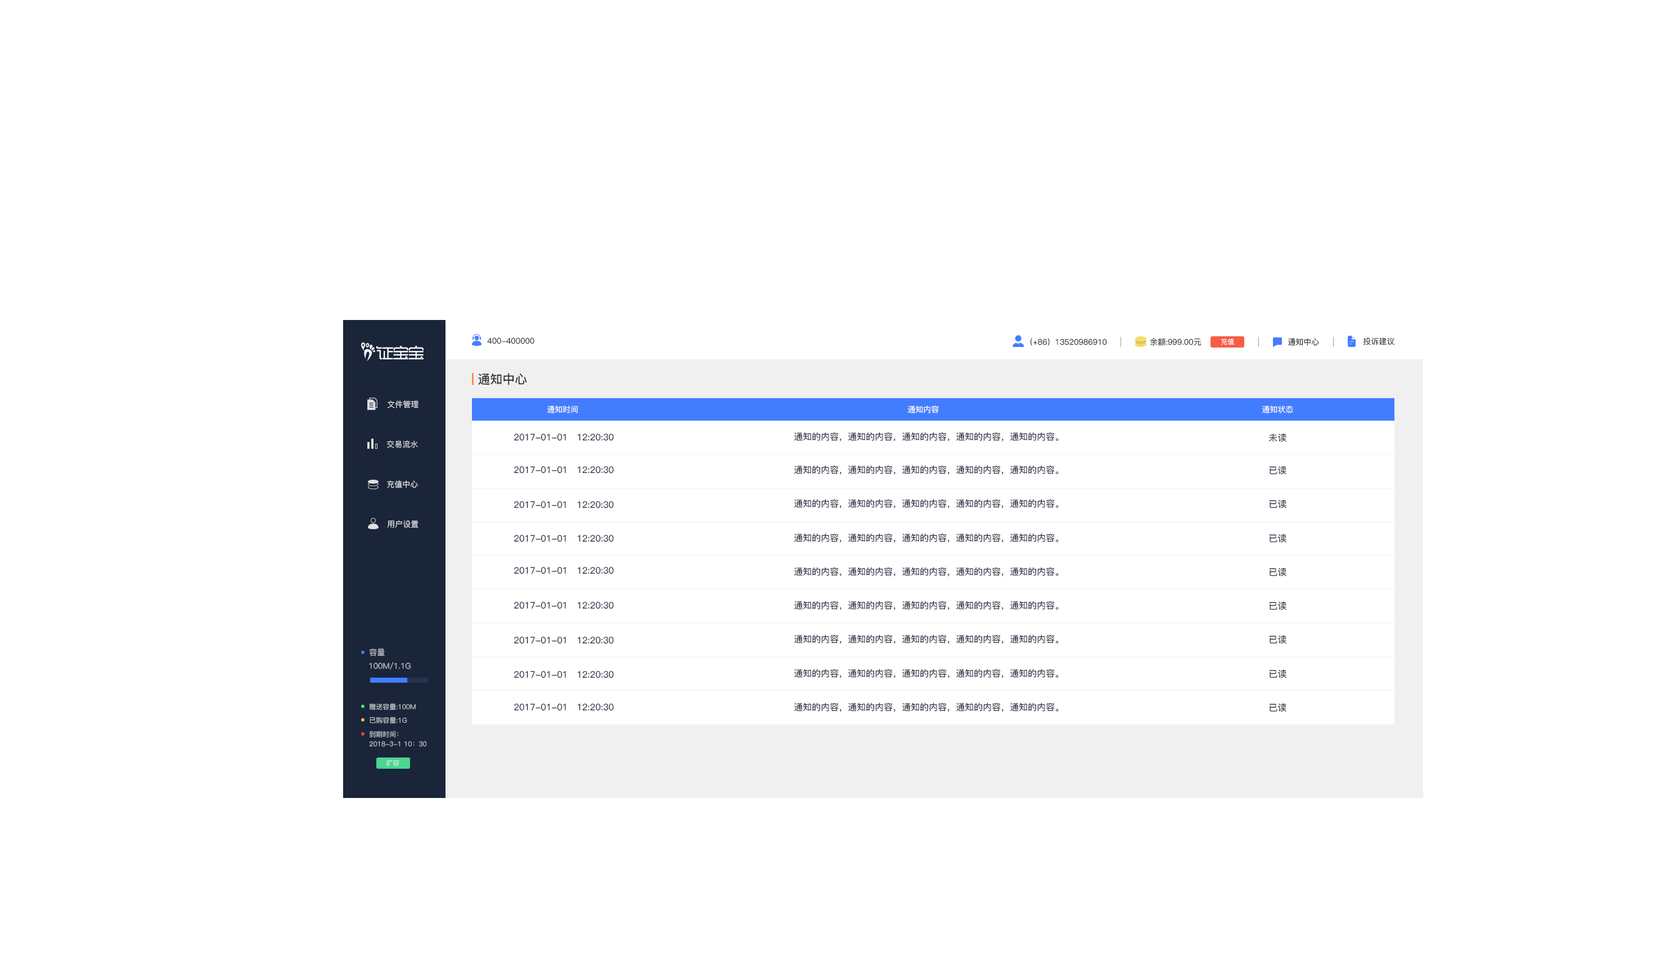
<style>
.page{position:relative;width:1656px;height:956px;background:#ffffff}
.page>*{position:absolute;margin:0}
.t1{font:7.9px "PingFang-SC-Medium";color:#232730}
.t2{font:6.8px "PingFang-SC-Medium";color:#ffffff}
.t3{font:12.4px "PingFang-SC-Bold";color:#333333}
.t4{font:7.9px "PingFang-SC-Medium";color:#dedfe1}
.t5{font:7.9px "PingFang-SC-Medium";color:#ffffff}
.t6{font:9px "PingFang-SC-Medium";color:#1f283d}
.t7{font:7.9px "PingFang-SC-Bold";color:#c2c4c7}
.t8{font:7.9px "PingFang-SC-Medium";color:#dfdfe1}
.t9{font:7.9px "PingFang-SC-Medium";color:#c1c2c6}
.t10{font:6.8px "PingFang-SC-Medium";color:#c1c2c6}
.t11{font:6.8px "PingFang-SC-Medium"}
</style>
<div class="page">
<p class="t1" style="left:487px;top:338px;width:47px;height:6px">400-400000</p>
<p class="t1" style="left:1030px;top:338px;width:77px;height:8px">（+86）13520986910</p>
<p class="t1" style="left:1150px;top:338px;width:52px;height:8px">余额:999.00元</p>
<p class="t2" style="left:1221px;top:339px;width:13px;height:6px">充值</p>
<p class="t1" style="left:1288px;top:338px;width:31px;height:8px">通知中心</p>
<p class="t1" style="left:1363px;top:338px;width:31px;height:7px">投诉建议</p>
<p class="t3" style="left:478px;top:373px;width:49px;height:12px">通知中心</p>
<p class="t4" style="left:387px;top:400px;width:31px;height:8px">文件管理</p>
<p class="t5" style="left:547px;top:406px;width:31px;height:7px">通知时间</p>
<p class="t5" style="left:907px;top:406px;width:32px;height:7px">通知内容</p>
<p class="t5" style="left:1262px;top:406px;width:31px;height:7px">通知状态</p>
<p class="t6" style="left:514px;top:434px;width:100px;height:7px">2017-01-01   12:20:30</p>
<p class="t6" style="left:794px;top:432px;width:265px;height:10px">通知的内容，通知的内容，通知的内容，通知的内容，通知的内容。</p>
<p class="t6" style="left:1269px;top:433px;width:17px;height:9px">未读</p>
<p class="t7" style="left:386px;top:440px;width:32px;height:8px">交易流水</p>
<p class="t6" style="left:514px;top:466px;width:100px;height:8px">2017-01-01   12:20:30</p>
<p class="t6" style="left:794px;top:465px;width:265px;height:10px">通知的内容，通知的内容，通知的内容，通知的内容，通知的内容。</p>
<p class="t6" style="left:1269px;top:466px;width:17px;height:9px">已读</p>
<p class="t8" style="left:387px;top:480px;width:31px;height:8px">充值中心</p>
<p class="t6" style="left:514px;top:501px;width:100px;height:7px">2017-01-01   12:20:30</p>
<p class="t6" style="left:794px;top:499px;width:265px;height:9px">通知的内容，通知的内容，通知的内容，通知的内容，通知的内容。</p>
<p class="t6" style="left:1269px;top:500px;width:17px;height:8px">已读</p>
<p class="t8" style="left:387px;top:520px;width:31px;height:8px">用户设置</p>
<p class="t6" style="left:794px;top:533px;width:265px;height:10px">通知的内容，通知的内容，通知的内容，通知的内容，通知的内容。</p>
<p class="t6" style="left:1269px;top:534px;width:17px;height:9px">已读</p>
<p class="t6" style="left:514px;top:535px;width:100px;height:7px">2017-01-01   12:20:30</p>
<p class="t6" style="left:514px;top:567px;width:100px;height:7px">2017-01-01   12:20:30</p>
<p class="t6" style="left:794px;top:567px;width:265px;height:10px">通知的内容，通知的内容，通知的内容，通知的内容，通知的内容。</p>
<p class="t6" style="left:1269px;top:568px;width:17px;height:9px">已读</p>
<p class="t6" style="left:514px;top:602px;width:100px;height:7px">2017-01-01   12:20:30</p>
<p class="t6" style="left:794px;top:601px;width:265px;height:9px">通知的内容，通知的内容，通知的内容，通知的内容，通知的内容。</p>
<p class="t6" style="left:1269px;top:601px;width:17px;height:9px">已读</p>
<p class="t6" style="left:514px;top:637px;width:100px;height:7px">2017-01-01   12:20:30</p>
<p class="t6" style="left:794px;top:634px;width:265px;height:10px">通知的内容，通知的内容，通知的内容，通知的内容，通知的内容。</p>
<p class="t6" style="left:1269px;top:635px;width:17px;height:9px">已读</p>
<p class="t9" style="left:370px;top:649px;width:15px;height:7px">容量</p>
<p class="t9" style="left:369px;top:662px;width:42px;height:8px">100M/1.1G</p>
<p class="t6" style="left:514px;top:671px;width:100px;height:7px">2017-01-01   12:20:30</p>
<p class="t6" style="left:794px;top:669px;width:265px;height:9px">通知的内容，通知的内容，通知的内容，通知的内容，通知的内容。</p>
<p class="t6" style="left:1269px;top:669px;width:17px;height:9px">已读</p>
<p class="t10" style="left:369px;top:704px;width:47px;height:6px">赠送容量:100M</p>
<p class="t6" style="left:514px;top:704px;width:100px;height:7px">2017-01-01   12:20:30</p>
<p class="t6" style="left:794px;top:703px;width:265px;height:9px">通知的内容，通知的内容，通知的内容，通知的内容，通知的内容。</p>
<p class="t6" style="left:1269px;top:703px;width:17px;height:9px">已读</p>
<p class="t10" style="left:370px;top:717px;width:37px;height:7px">已购容量:1G</p>
<p class="t10" style="left:369px;top:731px;width:30px;height:7px">到期时间：</p>
<p class="t10" style="left:369px;top:741px;width:58px;height:6px">2018-3-1 10：30</p>
<p class="t11" style="left:386px;top:760px;width:13px;height:7px">扩容</p>
</div>
